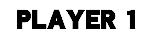
<style>
.page{position:relative;width:150px;height:40px;background:#ffffff}
.page>*{position:absolute;margin:0}
.t1{font:24px "DFGothic-SU-WINP-RKSJ-H";color:#000000}
</style>
<div class="page">
<p class="t1" style="left:17px;top:10px;width:118px;height:19px">PLAYER 1</p>
</div>
